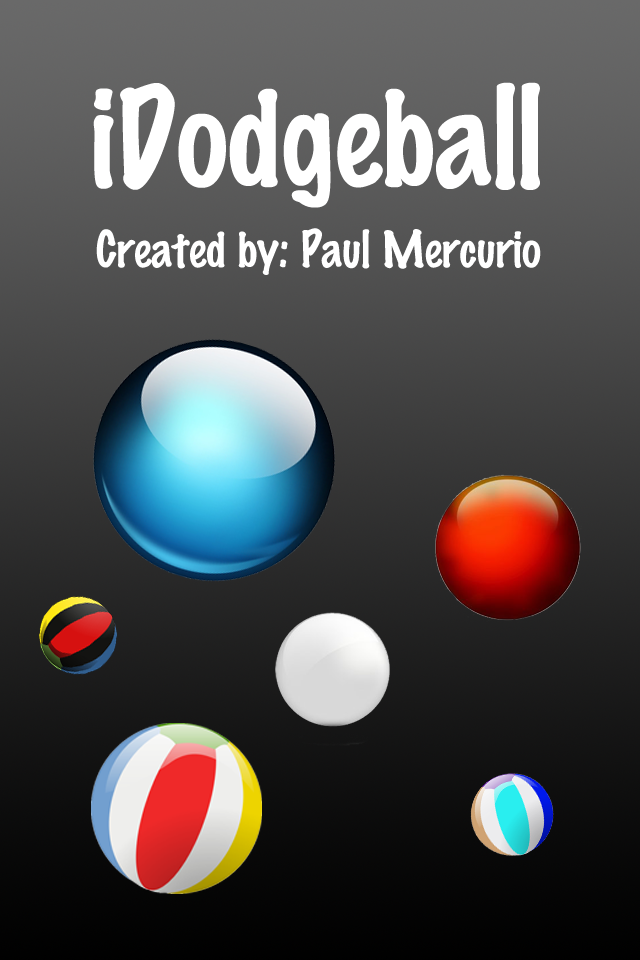
<style>
.page{position:relative;width:640px;height:960px}
.page>*{position:absolute;margin:0}
.t1{font:125px "MarkerFelt-Thin";color:#ffffff}
.t2{font:45.8px "MarkerFelt-Thin";color:#ffffff}
</style>
<div class="page">
<p class="t1" style="left:93px;top:82px;width:447px;height:126px">iDodgeball</p>
<p class="t2" style="left:96px;top:228px;width:445px;height:47px">Created by: Paul Mercurio</p>
</div>
